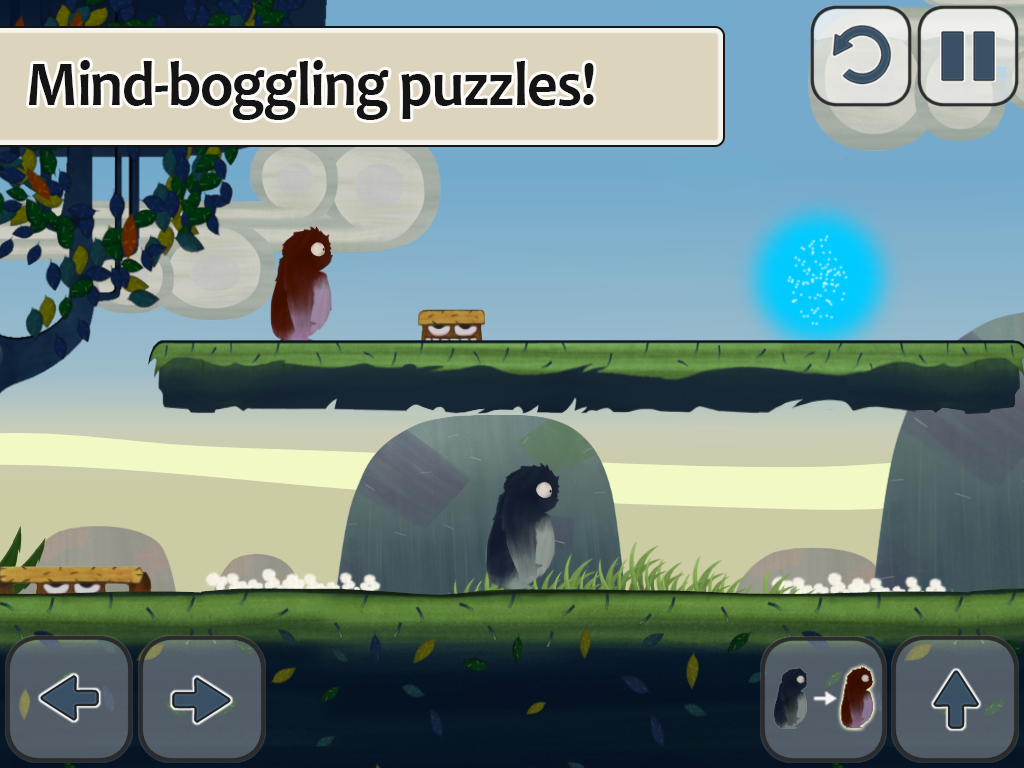
<style>
.page{position:relative;width:1024px;height:768px}
.page>*{position:absolute;margin:0}
.t1{font:63.6px "Candara-Bold";letter-spacing:-0.02em;color:#141414;scale:0.94 1}
</style>
<div class="page">
<p class="t1" style="left:28px;top:60px;width:566px;height:60px">Mind-boggling puzzles!</p>
</div>
